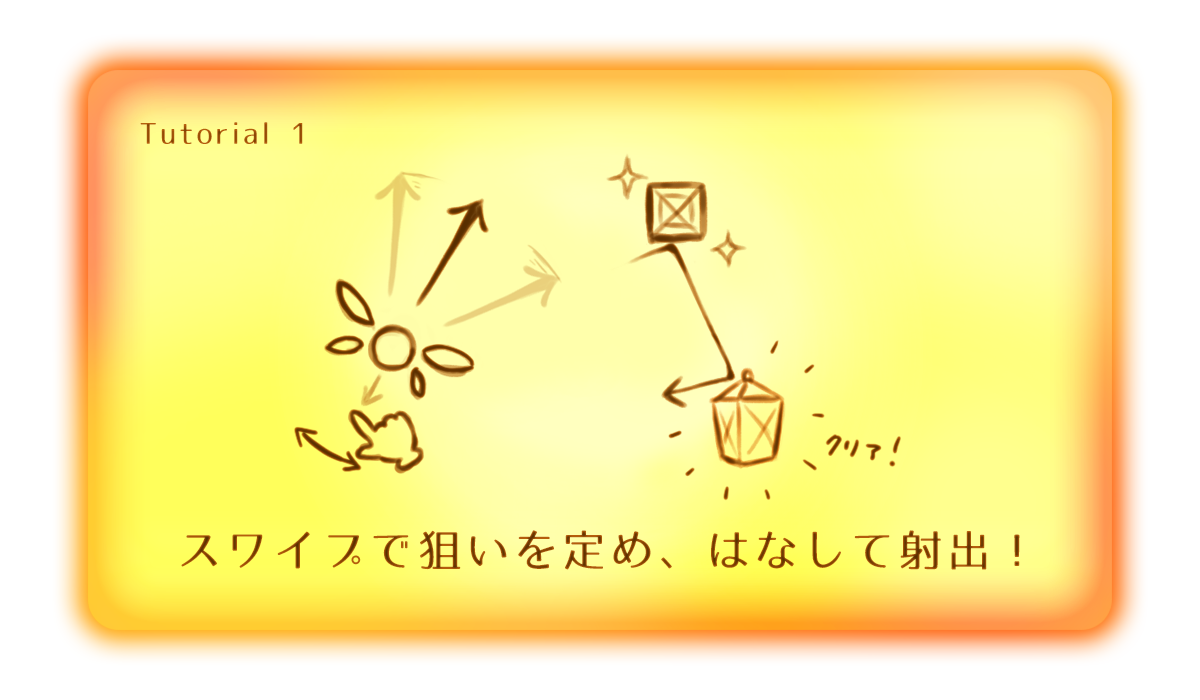
<style>
.page{position:relative;width:1200px;height:700px}
.page>*{position:absolute;margin:0}
.t1{font:29.2px "07LogoTypeGothic7";letter-spacing:0.1em;color:#9f5209}
.t2{font:43.8px "07LogoTypeGothic7";letter-spacing:0.1em}
</style>
<div class="page">
<p class="t1" style="left:140px;top:122px;width:163px;height:22px">Tutorial 1</p>
<p class="t2" style="left:181px;top:530px;width:839px;height:40px">スワイプで狙いを定め、はなして射出！</p>
</div>
